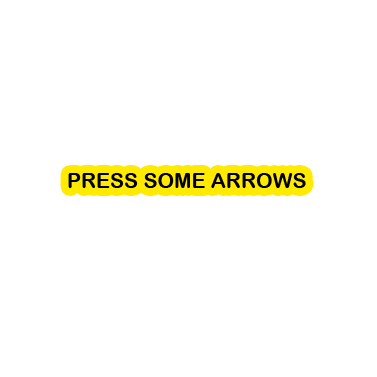
<style>
.page{position:relative;width:377px;height:377px;background:#ffffff}
.page>*{position:absolute;margin:0}
.t1{font:21px "ArialRoundedMTBold";color:#000000}
</style>
<div class="page">
<p class="t1" style="left:68px;top:173px;width:238px;height:15px">PRESS SOME ARROWS</p>
</div>
